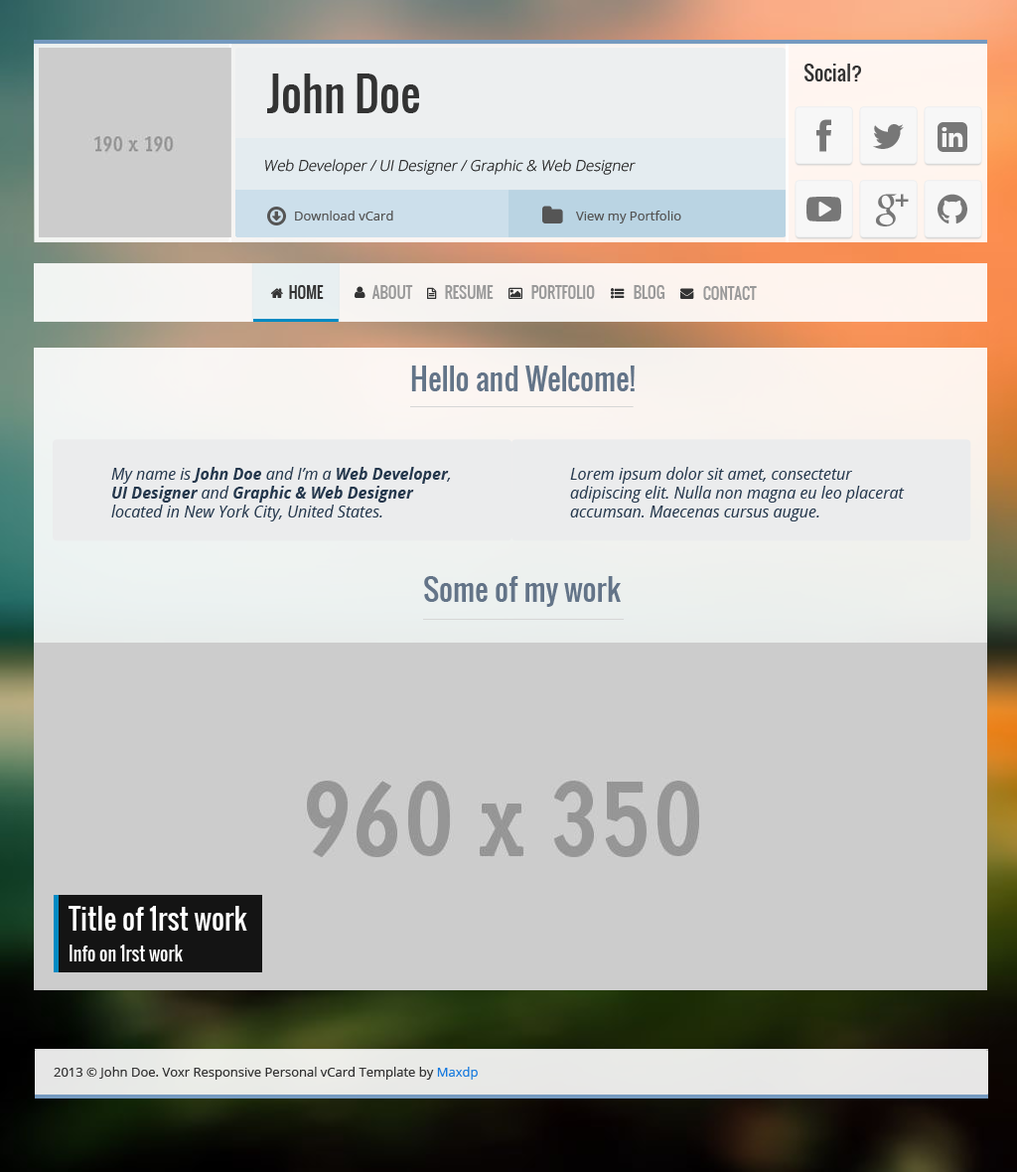
<style>
.page{position:relative;width:1017px;height:1172px;background:#cccccc}
.page>*{position:absolute;margin:0}
.t1{font:19.9px "Oswald-Regular";color:#333333}
.t2{font:44.7px "Oswald-Regular";color:#333333}
.t3{font:14.9px "OpenSans-Light";color:#222222;font-style:italic}
.t4{font:12.9px "OpenSans";color:#555555}
.t5{font:14.9px "Oswald-Regular";color:#333333}
.t6{font:14.9px "Oswald-Regular";color:#999999}
.t7{font:29.8px "Oswald-Regular";color:#637488}
.t8{font:15.9px "OpenSans-Italic";color:#24374c}
.t9{font:15.9px "OpenSans-BoldItalic";color:#24374c}
.t10{font:27.8px "Oswald-Regular";color:#ffffff}
.t11{font:17.9px "Oswald-Regular";color:#ffffff}
.t12{font:12.9px "OpenSans";color:#333333}
.t13{font:12.9px "OpenSans";color:#187bde}
</style>
<div class="page">
<p class="t1" style="left:805px;top:64px;width:56px;height:17px">Social?</p>
<p class="t2" style="left:267px;top:74px;width:152px;height:39px">John Doe</p>
<p class="t3" style="left:265px;top:159px;width:371px;height:16px">Web Developer / UI Designer / Graphic &amp; Web Designer</p>
<p class="t4" style="left:295px;top:211px;width:98px;height:10px">Download vCard</p>
<p class="t4" style="left:576px;top:211px;width:105px;height:13px">View my Portfolio</p>
<p class="t5" style="left:289px;top:285px;width:35px;height:14px">HOME</p>
<p class="t6" style="left:372px;top:285px;width:41px;height:14px">ABOUT</p>
<p class="t6" style="left:445px;top:285px;width:49px;height:14px">RESUME</p>
<p class="t6" style="left:531px;top:285px;width:64px;height:14px">PORTFOLIO</p>
<p class="t6" style="left:634px;top:285px;width:32px;height:14px">BLOG</p>
<p class="t6" style="left:703px;top:286px;width:54px;height:14px">CONTACT</p>
<p class="t7" style="left:411px;top:366px;width:224px;height:25px">Hello and Welcome!</p>
<p class="t8" style="left:111px;top:467px;width:340px;height:55px">My name is <span class="t9">John Doe </span>and I’m a <span class="t9">Web Developer</span>,<br><span class="t9">UI Designer </span>and <span class="t9">Graphic &amp; Web Designer<br></span>located in New York City, United States.</p>
<p class="t8" style="left:570px;top:467px;width:335px;height:55px">Lorem ipsum dolor sit amet, consectetur<br>adipiscing elit. Nulla non magna eu leo placerat<br>accumsan. Maecenas cursus augue.</p>
<p class="t7" style="left:424px;top:576px;width:197px;height:31px">Some of my work</p>
<p class="t10" style="left:69px;top:906px;width:178px;height:25px">Title of 1rst work</p>
<p class="t11" style="left:70px;top:945px;width:113px;height:17px">Info on 1rst work</p>
<p class="t12" style="left:54px;top:1067px;width:424px;height:13px">2013 © John Doe. Voxr Responsive Personal vCard Template by <span class="t13">Maxdp</span></p>
</div>
